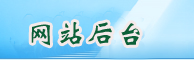
<style>
.page{position:relative;width:194px;height:60px}
.page>*{position:absolute;margin:0}
.t1{font:30px "STXinwei";color:#0c5f37}
</style>
<div class="page">
<p class="t1" style="left:31px;top:22px;width:109px;height:24px">网站后台</p>
</div>
